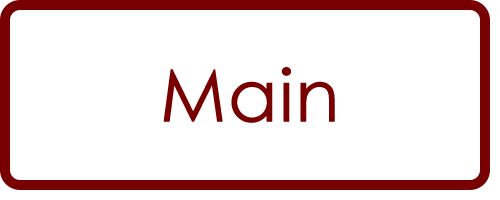
<style>
.page{position:relative;width:500px;height:200px;background:#ffffff}
.page>*{position:absolute;margin:0}
.t1{font:72px "CenturyGothic";color:#790000;font-weight:bold}
</style>
<div class="page">
<p class="t1" style="left:163px;top:67px;width:172px;height:56px">Main</p>
</div>
